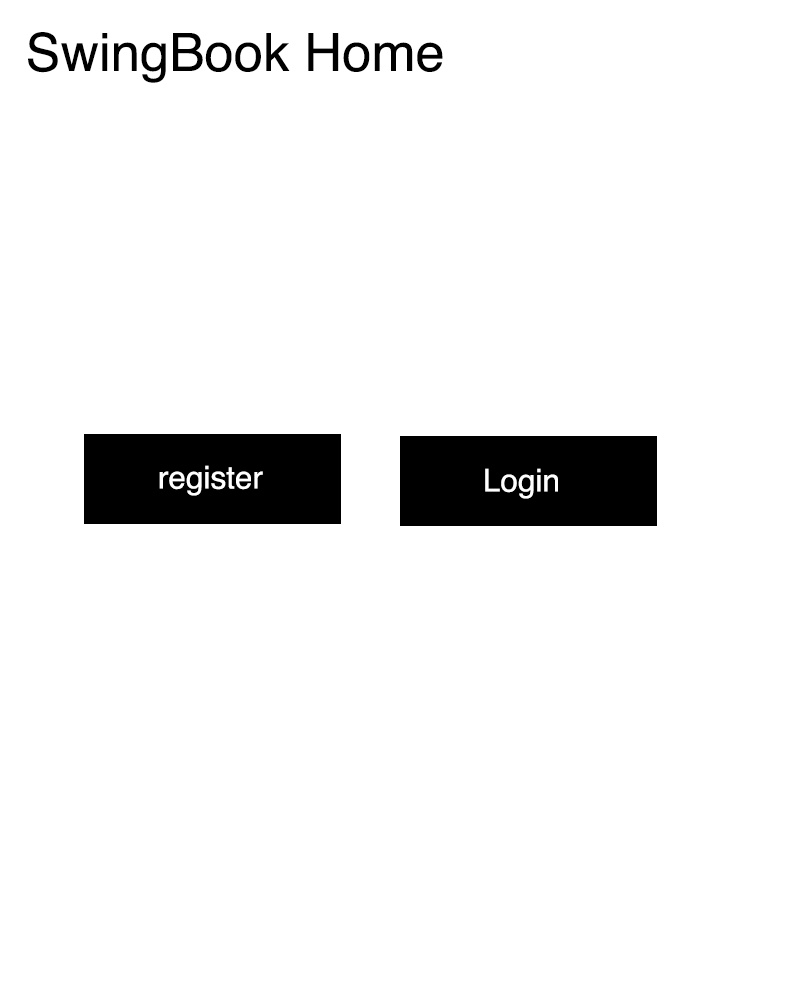
<style>
.page{position:relative;width:800px;height:1000px;background:#ffffff}
.page>*{position:absolute;margin:0}
.t1{font:52.7px "Helvetica";color:#000000}
.t2{font:31.5px "Helvetica";color:#ffffff}
</style>
<div class="page">
<p class="t1" style="left:28px;top:32px;width:415px;height:51px">SwingBook Home</p>
<p class="t2" style="left:159px;top:465px;width:104px;height:31px">register</p>
<p class="t2" style="left:485px;top:468px;width:73px;height:31px">Login</p>
</div>
